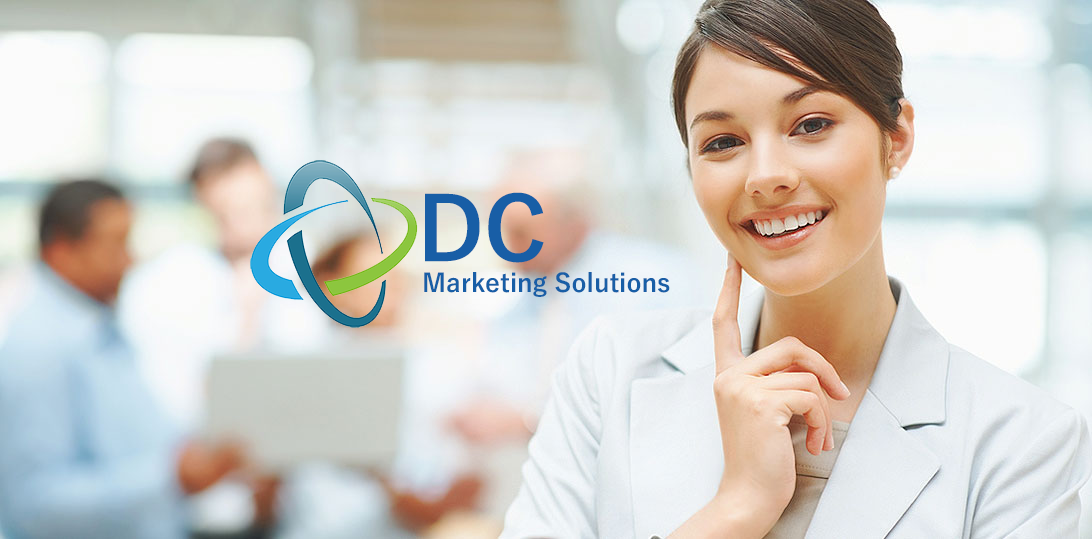
<style>
.page{position:relative;width:1092px;height:539px}
.page>*{position:absolute;margin:0}
.t1{font:25.3px "YuGothic-Bold";color:#185ea6}
.t2{font:86.7px "YuGothic-Bold";color:#185ea6}
</style>
<div class="page">
<p class="t1" style="left:424px;top:192px;width:246px;height:105px"><span class="t2">DC<br> </span>Marketing Solutions</p>
</div>
